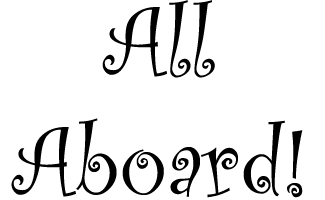
<style>
.page{position:relative;width:325px;height:200px;background:#ffffff}
.page>*{position:absolute;margin:0}
.t1{font:100px "CurlzMT";color:#000000}
</style>
<div class="page">
<p class="t1" style="left:11px;top:0px;width:292px;height:198px;text-align:center">All<br>Aboard!</p>
</div>
